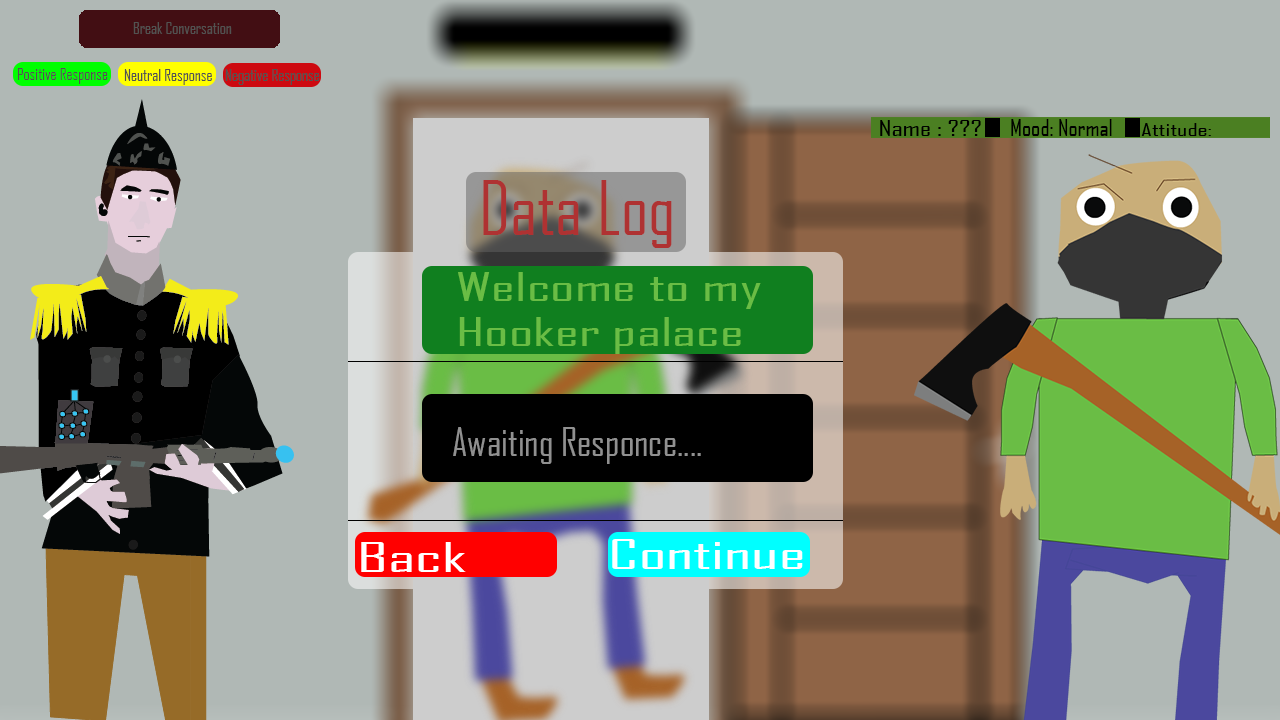
<style>
.page{position:relative;width:1280px;height:720px;background:#b0b8b5}
.page>*{position:absolute;margin:0}
.t1{font:15.7px "AgencyFB-Reg";color:#525251}
.t2{font:21.3px "AgencyFB-Reg";color:#000000;scale:1.4 1}
.t3{font:22.2px "AgencyFB-Reg";color:#000000;scale:1.09 1}
.t4{font:16.6px "AgencyFB-Reg";color:#000000;scale:1.62 1}
.t5{font:72px "AgencyFB-Reg";color:#af3232}
.t6{font:38.3px "AgencyFB-Reg";color:#6abd45;scale:1.68 1}
.t7{font:38.3px "AgencyFB-Reg";color:#909090}
.t8{font:39.1px "AgencyFB-Reg";color:#ffffff;scale:1.86 1}
.t9{font:39.1px "AgencyFB-Reg";color:#ffffff;scale:1.84 1}
</style>
<div class="page">
<p class="t1" style="left:133px;top:22px;width:99px;height:12px">Break Conversation</p>
<p class="t1" style="left:17px;top:68px;width:91px;height:16px">Positive Response</p>
<p class="t1" style="left:124px;top:69px;width:88px;height:16px">Neutral Response</p>
<p class="t1" style="left:225px;top:69px;width:95px;height:16px">Negative Response</p>
<p class="t2" style="left:880px;top:120px;width:101px;height:16px">Name : ???</p>
<p class="t3" style="left:1011px;top:119px;width:101px;height:17px">Mood: Normal</p>
<p class="t4" style="left:1141px;top:123px;width:70px;height:13px">Attitude:</p>
<p class="t5" style="left:483px;top:180px;width:189px;height:68px">Data Log</p>
<p class="t6" style="left:458px;top:272px;width:303px;height:82px">Welcome to my<br>Hooker palace</p>
<p class="t7" style="left:453px;top:427px;width:248px;height:37px">Awaiting Responce....</p>
<p class="t8" style="left:361px;top:542px;width:105px;height:30px">Back</p>
<p class="t9" style="left:612px;top:539px;width:191px;height:30px">Continue</p>
</div>
